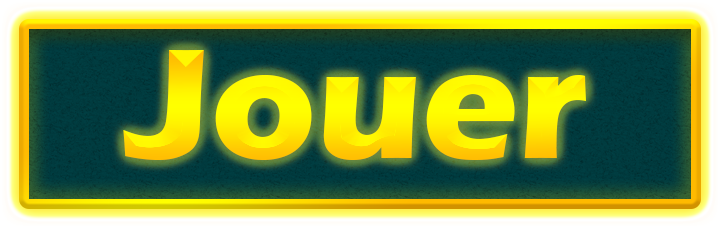
<style>
.page{position:relative;width:721px;height:229px}
.page>*{position:absolute;margin:0}
.t1{font:161.7px "ErasITC-Bold";color:#fffc00}
</style>
<div class="page">
<p class="t1" style="left:123px;top:50px;width:463px;height:110px">Jouer</p>
</div>
